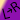
<style>
.page{position:relative;width:20px;height:20px;background:#8e10af}
.page>*{position:absolute;margin:0}
.t1{font:14.6px "MyriadPro-Regular";color:#000000}
</style>
<div class="page">
<p class="t1" style="left:10px;top:2px;width:11px;height:11px;rotate:-35deg">R</p>
</div>
